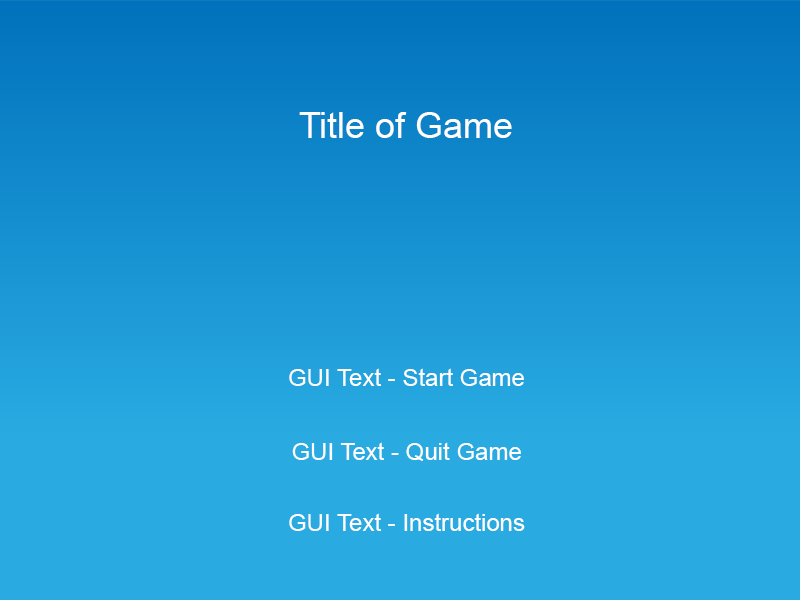
<style>
.page{position:relative;width:800px;height:600px;background:#29abe2}
.page>*{position:absolute;margin:0}
.t1{font:36px "ArialMT";color:#ffffff}
.t2{font:24px "ArialMT";color:#ffffff}
</style>
<div class="page">
<p class="t1" style="left:299px;top:112px;width:213px;height:26px">Title of Game</p>
<p class="t2" style="left:289px;top:368px;width:235px;height:18px">GUI Text - Start Game</p>
<p class="t2" style="left:292px;top:442px;width:229px;height:19px">GUI Text - Quit Game</p>
<p class="t2" style="left:289px;top:513px;width:236px;height:18px">GUI Text - Instructions</p>
</div>
